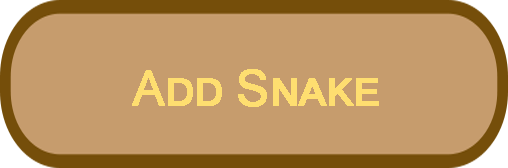
<style>
.page{position:relative;width:508px;height:168px;background:#c69c6d}
.page>*{position:absolute;margin:0}
.t1{font:48px "ArialMT";letter-spacing:-0.025em;color:#fede70;font-variant:small-caps;font-weight:bold}
</style>
<div class="page">
<p class="t1" style="left:132px;top:69px;width:247px;height:38px">Add Snake</p>
</div>
